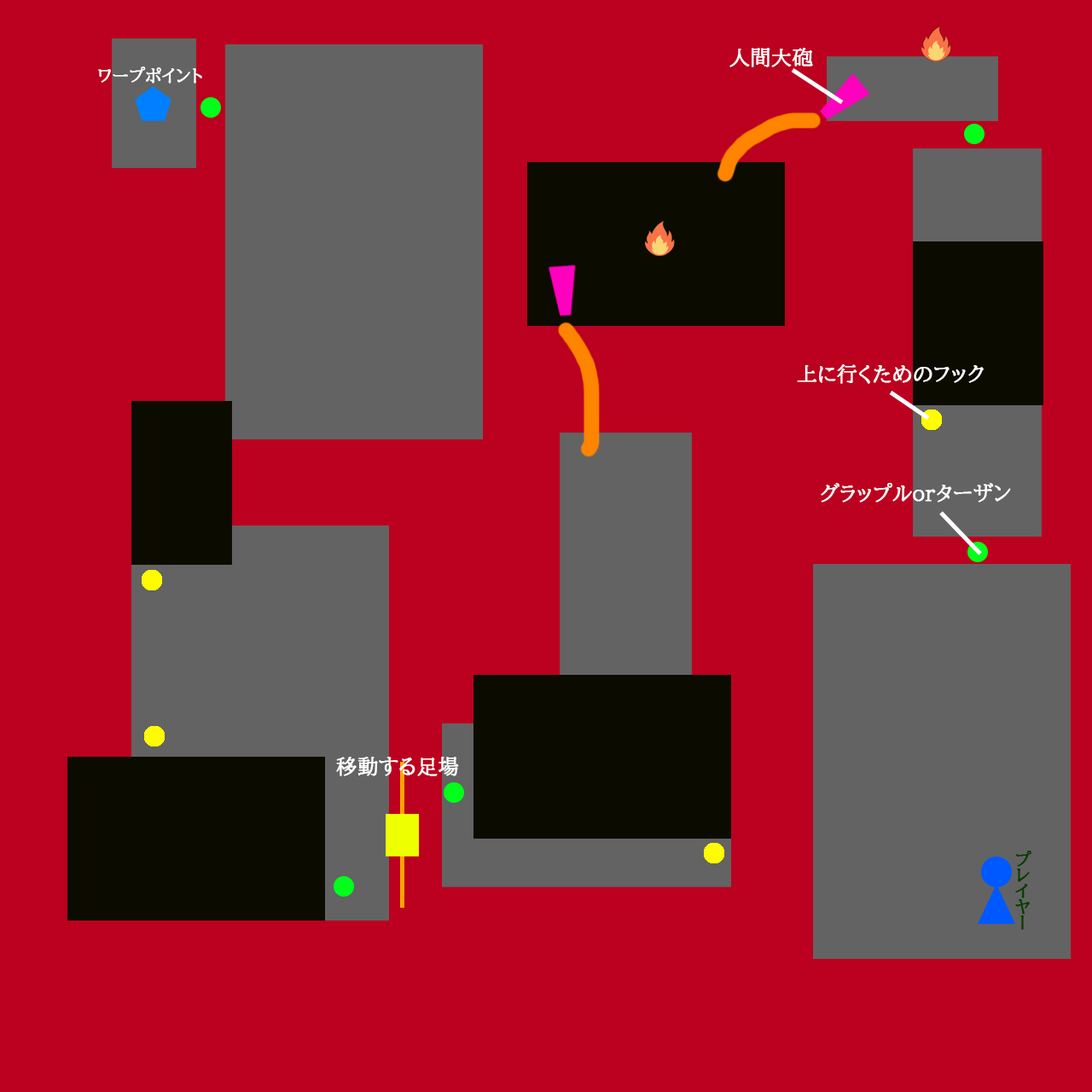
<style>
.page{position:relative;width:1092px;height:1092px;background:#bc001f}
.page>*{position:absolute;margin:0}
.t1{font:20.5px "BIZ-UDPMincho-Medium";color:#ffffff;font-weight:bold}
.t2{font:17.1px "BIZ-UDPMincho-Medium";color:#ffffff;font-weight:bold}
</style>
<div class="page">
<p class="t1" style="left:729px;top:48px;width:84px;height:19px">人間大砲</p>
<p class="t2" style="left:98px;top:67px;width:104px;height:17px">ワープポイント</p>
<p class="t1" style="left:797px;top:364px;width:187px;height:20px">上に行くためのフック</p>
<p class="t1" style="left:821px;top:483px;width:190px;height:19px">グラップルorターザン</p>
<p class="t1" style="left:336px;top:757px;width:123px;height:19px">移動する足場</p>
</div>
